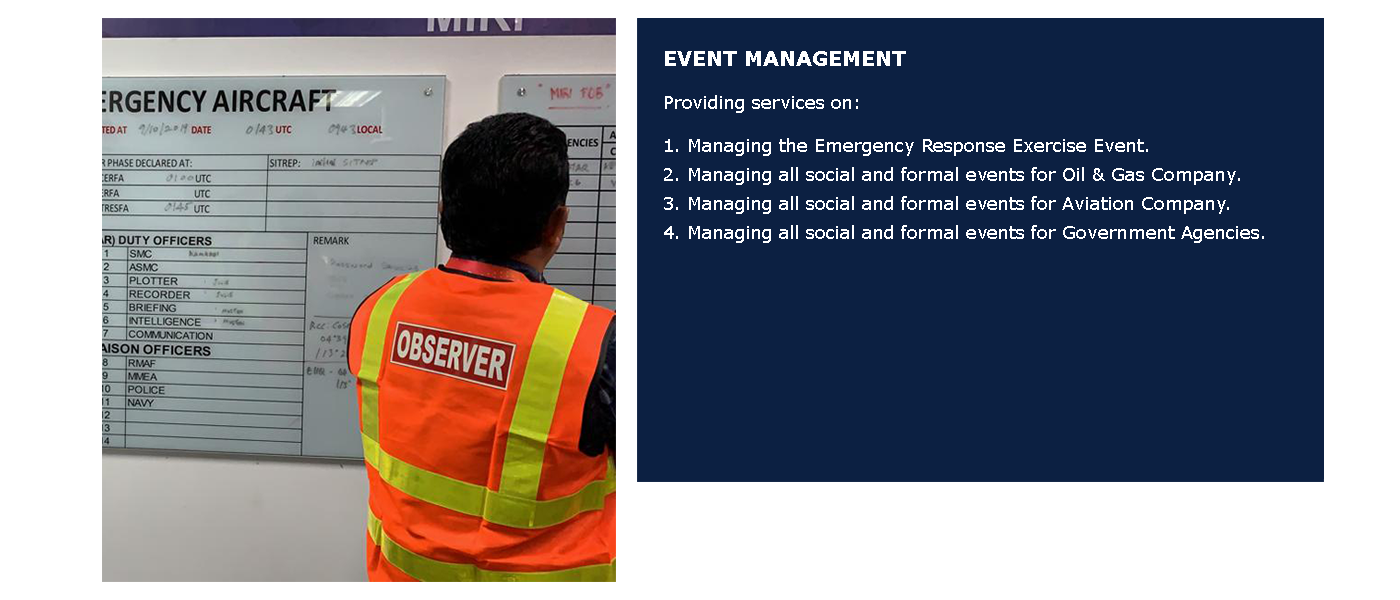
<style>
.page{position:relative;width:1400px;height:600px;background:#0c2042}
.page>*{position:absolute;margin:0}
.t1{font:18px "Verdana";color:#ffffff}
.t2{font:20px "Verdana-Bold";color:#ffffff}
</style>
<div class="page">
<p class="t1" style="left:664px;top:51px;width:600px;height:192px"><span class="t2">EVENT MANAGEMENT<br></span><br>Providing services on:<br><br>1. Managing the Emergency Response Exercise Event.<br><br>2. Managing all social and formal events for Oil &amp; Gas Company.<br><br>3. Managing all social and formal events for Aviation Company.<br><br>4. Managing all social and formal events for Government Agencies.</p>
</div>
